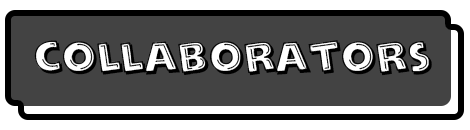
<style>
.page{position:relative;width:470px;height:130px;background:#434343}
.page>*{position:absolute;margin:0}
.t1{font:41.7px "LooneyTunesBT-Tilt";color:#000000}
</style>
<div class="page">
<p class="t1" style="left:34px;top:40px;width:398px;height:36px">collaborators</p>
</div>
